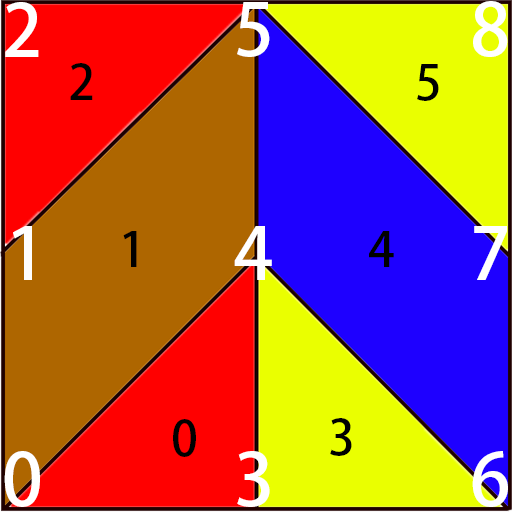
<style>
.page{position:relative;width:512px;height:512px;background:#ae6600}
.page>*{position:absolute;margin:0}
.t1{font:71.9px "AdobeHeitiStd-Regular";color:#ffffff}
.t2{font:47.9px "AdobeHeitiStd-Regular";color:#000000}
</style>
<div class="page">
<p class="t1" style="left:5px;top:2px;width:34px;height:55px">2</p>
<p class="t1" style="left:237px;top:2px;width:33px;height:55px">5</p>
<p class="t1" style="left:473px;top:1px;width:35px;height:56px">8</p>
<p class="t2" style="left:70px;top:63px;width:23px;height:37px">2</p>
<p class="t2" style="left:417px;top:64px;width:22px;height:37px">5</p>
<p class="t1" style="left:13px;top:226px;width:19px;height:54px">1</p>
<p class="t2" style="left:123px;top:231px;width:14px;height:36px">1</p>
<p class="t1" style="left:234px;top:226px;width:38px;height:54px">4</p>
<p class="t2" style="left:369px;top:231px;width:25px;height:36px">4</p>
<p class="t1" style="left:474px;top:226px;width:33px;height:54px">7</p>
<p class="t2" style="left:173px;top:419px;width:23px;height:38px">0</p>
<p class="t2" style="left:330px;top:418px;width:22px;height:38px">3</p>
<p class="t1" style="left:4px;top:451px;width:36px;height:56px">0</p>
<p class="t1" style="left:237px;top:451px;width:33px;height:56px">3</p>
<p class="t1" style="left:472px;top:451px;width:36px;height:56px">6</p>
</div>
